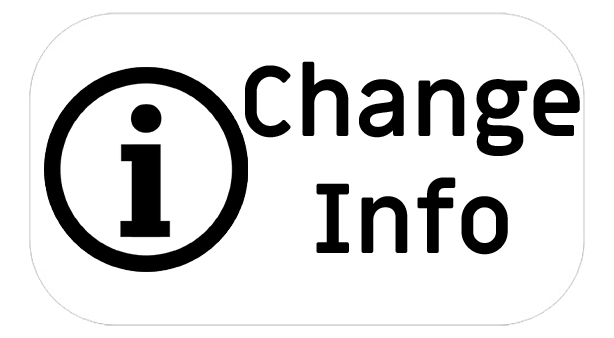
<style>
.page{position:relative;width:614px;height:338px;background:#ffffff}
.page>*{position:absolute;margin:0}
.t1{font:97px "MiriamLibre-Bold";color:#000000}
</style>
<div class="page">
<p class="t1" style="left:245px;top:61px;width:335px;height:194px;text-align:center">Change<br>Info</p>
</div>
